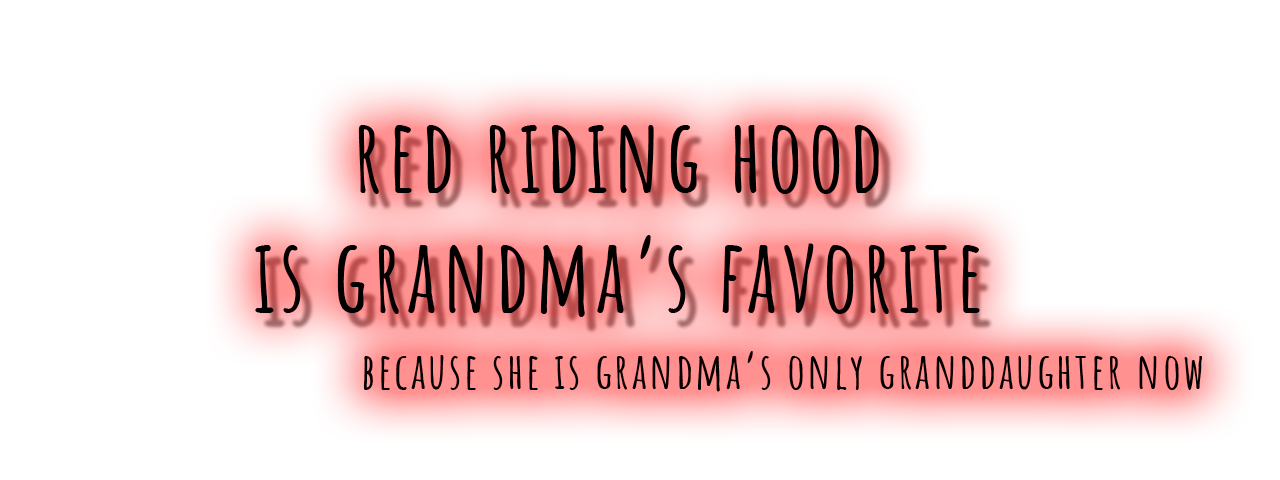
<style>
.page{position:relative;width:1280px;height:480px;background:#ffffff}
.page>*{position:absolute;margin:0}
.t1{font:100px "AmaticSC-Bold";letter-spacing:0.05em;color:#000000}
.t2{font:50px "AmaticSC-Bold";letter-spacing:0.05em;color:#000000}
</style>
<div class="page">
<p class="t1" style="left:255px;top:124px;width:725px;height:193px;text-align:center">red riding hood <br>is grandma’s favorite</p>
<p class="t2" style="left:364px;top:351px;width:838px;height:41px">because she is grandma’s only granddaughter now</p>
</div>
